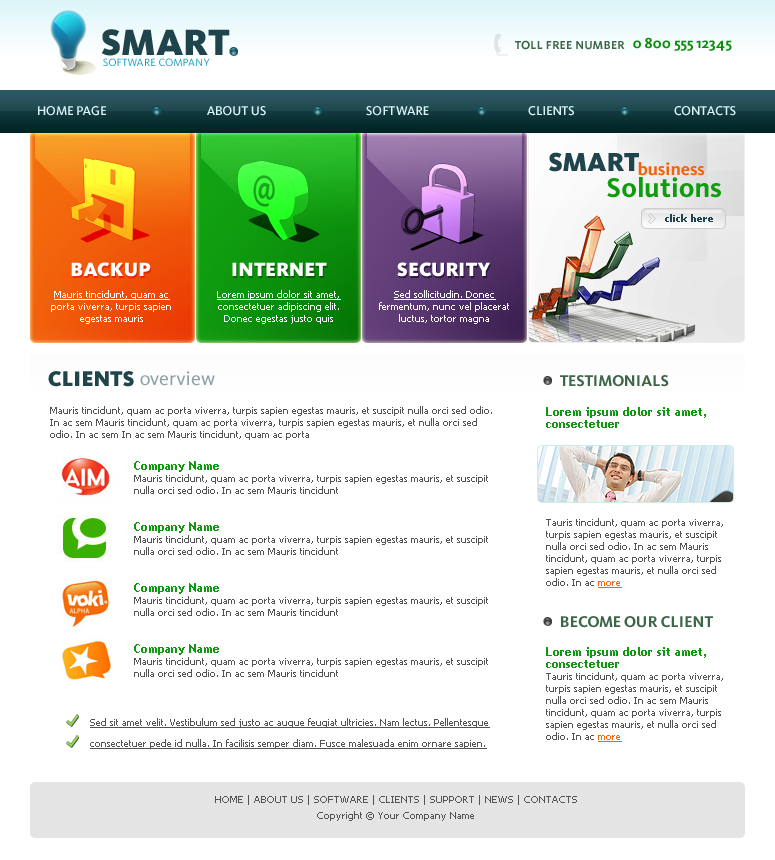
<style>
.page{position:relative;width:775px;height:860px;background:#ffffff}
.page>*{position:absolute;margin:0}
.t1{font:38px "Kievit-Black";color:#1f444c}
.t2{font:12px "Kievit-Bold";color:#3d6547}
.t3{font:15px "Kievit-Bold";color:#0b8c0b}
.t4{font:11px "Kievit-Regular";color:#169ec1}
.t5{font:13px "Kievit-Medium";color:#daf5f9}
.t6{font:27px "Kievit-Black";color:#1f444c}
.t7{font:18px "Kievit-Bold";color:#f2630b}
.t8{font:28px "Kievit-Bold";color:#0f9c0f}
.t9{font:10px "Tahoma-Bold";color:#1f444c}
.t10{font:20px "Kievit-Black";color:#ffffff}
.t11{font:10px/12px "Tahoma";color:#ffffff}
.t12{font:10px/12px "Tahoma";color:#ffffff;text-decoration:underline}
.t13{font:22px "Kievit-Black";color:#1f444c}
.t14{font:20px "Kievit-Book";color:#8ea1a5}
.t15{font:16px "Kievit-Bold";color:#3d6547}
.t16{font:10px/12px "Tahoma";color:#535353}
.t17{font:12px/12px "TrebuchetMS-Bold";color:#0f990f}
.t18{font:10px/12px "Tahoma";color:#f2660c;text-decoration:underline}
.t19{font:10px/21px "Tahoma";color:#535353;text-decoration:underline}
.t20{font:10px/16px "Tahoma";color:#535353}
</style>
<div class="page">
<p class="t1" style="left:101px;top:29px;width:129px;height:27px">SMART</p>
<p class="t2" style="left:515px;top:40px;width:110px;height:10px">TOLL FREE NUMBER</p>
<p class="t3" style="left:633px;top:37px;width:99px;height:14px">0 800 555 12345</p>
<p class="t4" style="left:103px;top:58px;width:107px;height:9px">SOFTWARE COMPANY</p>
<p class="t5" style="left:38px;top:106px;width:68px;height:10px">HOME PAGE</p>
<p class="t5" style="left:207px;top:106px;width:59px;height:10px">ABOUT US</p>
<p class="t5" style="left:366px;top:106px;width:63px;height:10px">SOFTWARE</p>
<p class="t5" style="left:528px;top:106px;width:46px;height:10px">CLIENTS</p>
<p class="t5" style="left:674px;top:106px;width:62px;height:10px">CONTACTS</p>
<p class="t6" style="left:549px;top:152px;width:90px;height:20px">SMART</p>
<p class="t7" style="left:638px;top:162px;width:67px;height:14px">business</p>
<p class="t8" style="left:607px;top:177px;width:114px;height:21px">Solutions</p>
<p class="t9" style="left:665px;top:214px;width:48px;height:8px">click here</p>
<p class="t10" style="left:71px;top:262px;width:80px;height:15px">BACKUP</p>
<p class="t10" style="left:232px;top:262px;width:95px;height:14px">INTERNET</p>
<p class="t10" style="left:397px;top:262px;width:93px;height:15px">SECURITY</p>
<p class="t11" style="left:51px;top:290px;width:120px;height:34px;text-align:center"><span class="t12">Mauris tincidunt, quam ac </span>porta viverra, turpis sapien egestas mauris</p>
<p class="t11" style="left:217px;top:290px;width:124px;height:34px;text-align:center"><span class="t12">Lorem ipsum dolor sit amet, </span>consectetuer adipiscing elit. Donec egestas justo quis</p>
<p class="t11" style="left:379px;top:290px;width:130px;height:34px;text-align:center"><span class="t12">Sed sollicitudin. Donec </span>fermentum, nunc vel placerat luctus, tortor magna</p>
<p class="t13" style="left:48px;top:371px;width:86px;height:16px">CLIENTS</p>
<p class="t14" style="left:140px;top:371px;width:75px;height:15px">overview</p>
<p class="t15" style="left:560px;top:375px;width:109px;height:12px">TESTIMONIALS</p>
<p class="t16" style="left:50px;top:406px;width:442px;height:34px">Mauris tincidunt, quam ac porta viverra, turpis sapien egestas mauris, et suscipit nulla orci sed odio. In ac sem Mauris tincidunt, quam ac porta viverra, turpis sapien egestas mauris, et nulla orci sed odio. In ac sem In ac sem Mauris tincidunt, quam ac porta</p>
<p class="t17" style="left:546px;top:407px;width:160px;height:21px">Lorem ipsum dolor sit amet, consectetuer</p>
<p class="t16" style="left:134px;top:461px;width:354px;height:33px"><span class="t17">Company Name <br></span>Mauris tincidunt, quam ac porta viverra, turpis sapien egestas mauris, et suscipit nulla orci sed odio. In ac sem Mauris tincidunt</p>
<p class="t16" style="left:546px;top:518px;width:177px;height:70px">Tauris tincidunt, quam ac porta viverra, turpis sapien egestas mauris, et suscipit nulla orci sed odio. In ac sem Mauris tincidunt, quam ac porta viverra, turpis sapien egestas mauris, et nulla orci sed odio. In ac <span class="t18">more</span></p>
<p class="t16" style="left:134px;top:522px;width:354px;height:33px"><span class="t17">Company Name <br></span>Mauris tincidunt, quam ac porta viverra, turpis sapien egestas mauris, et suscipit nulla orci sed odio. In ac sem Mauris tincidunt</p>
<p class="t16" style="left:134px;top:583px;width:354px;height:33px"><span class="t17">Company Name <br></span>Mauris tincidunt, quam ac porta viverra, turpis sapien egestas mauris, et suscipit nulla orci sed odio. In ac sem Mauris tincidunt</p>
<p class="t15" style="left:561px;top:616px;width:152px;height:12px">BECOME OUR CLIENT</p>
<p class="t16" style="left:134px;top:644px;width:354px;height:33px"><span class="t17">Company Name  <br></span>Mauris tincidunt, quam ac porta viverra, turpis sapien egestas mauris, et suscipit nulla orci sed odio. In ac sem Mauris tincidunt</p>
<p class="t16" style="left:546px;top:647px;width:177px;height:95px"><span class="t17">Lorem ipsum dolor sit amet, consectetuer <br></span>Tauris tincidunt, quam ac porta viverra, turpis sapien egestas mauris, et suscipit nulla orci sed odio. In ac sem Mauris tincidunt, quam ac porta viverra, turpis sapien egestas mauris, et nulla orci sed odio. In ac <span class="t18">more</span></p>
<p class="t19" style="left:90px;top:718px;width:400px;height:31px">Sed sit amet velit. Vestibulum sed justo ac augue feugiat ultricies. Nam lectus. Pellentesque consectetuer pede id nulla. In facilisis semper diam. Fusce malesuada enim ornare sapien.</p>
<p class="t20" style="left:215px;top:795px;width:362px;height:26px;text-align:center">HOME | ABOUT US | SOFTWARE | CLIENTS | SUPPORT | NEWS | CONTACTS<br>Copyright © Your Company Name</p>
</div>
